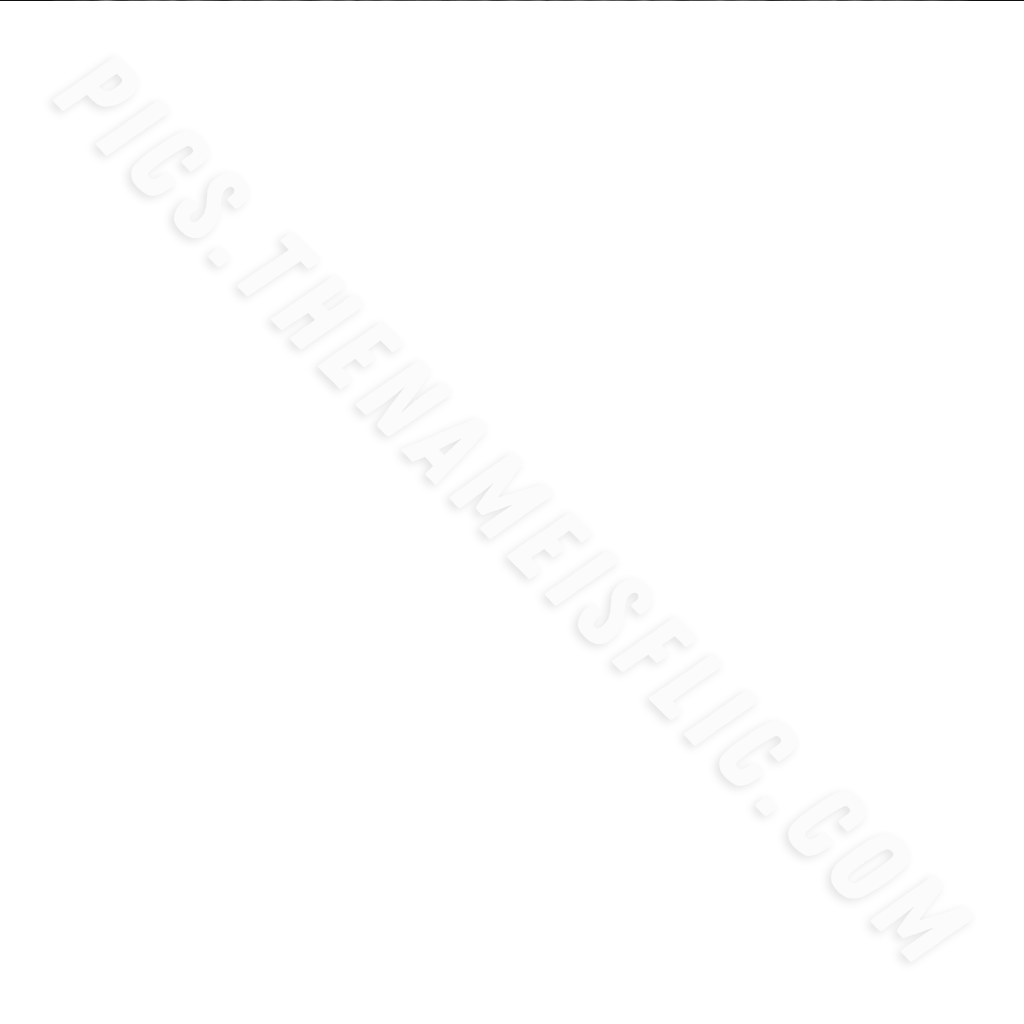
<style>
.page{position:relative;width:1024px;height:1024px;background:#ffffff}
.page>*{position:absolute;margin:0}
.t1{font:111.2px "ZingRustDemo-Base";letter-spacing:0.1em;color:#fbfbfb}
</style>
<div class="page">
<p class="t1" style="left:52px;top:54px;width:924px;height:907px;rotate:45deg">PICS.THENAMEISFLIC.COM</p>
</div>
